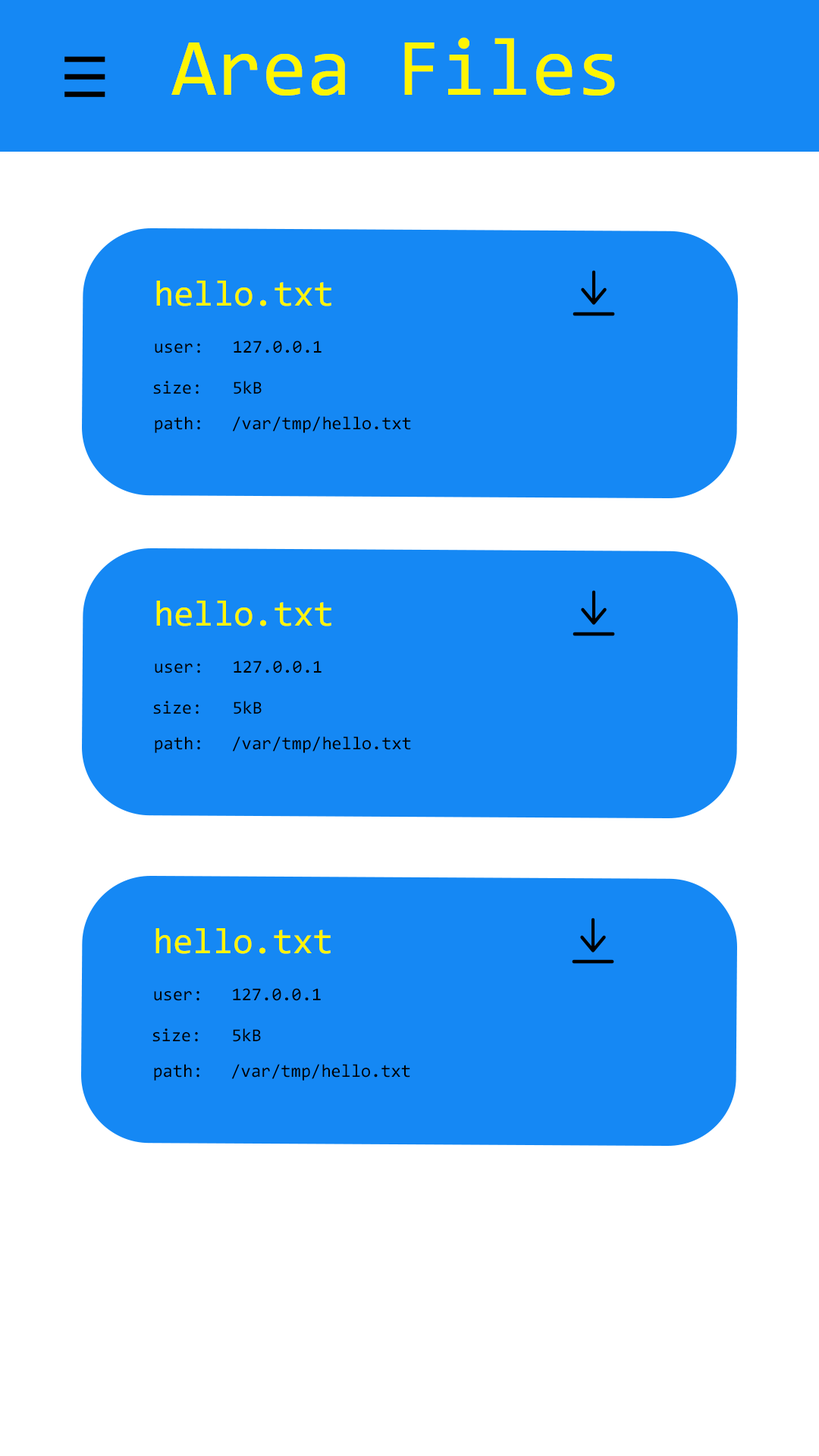
<style>
.page{position:relative;width:819px;height:1456px;background:#1588f4}
.page>*{position:absolute;margin:0}
.t1{font:81.9px "Consolas";color:#fef502}
.t2{font:36.4px "Consolas";color:#fef502}
.t3{font:18.2px "Consolas";color:#000000}
</style>
<div class="page">
<p class="t1" style="left:171px;top:37px;width:444px;height:59px">Area Files</p>
<p class="t2" style="left:156px;top:281px;width:175px;height:25px">hello.txt</p>
<p class="t3" style="left:234px;top:340px;width:88px;height:13px">127.0.0.1</p>
<p class="t3" style="left:155px;top:344px;width:45px;height:9px">user:</p>
<p class="t3" style="left:153px;top:381px;width:46px;height:13px">size:</p>
<p class="t3" style="left:234px;top:381px;width:28px;height:13px">5kB</p>
<p class="t3" style="left:155px;top:416px;width:45px;height:17px">path:</p>
<p class="t3" style="left:232px;top:416px;width:179px;height:17px">/var/tmp/hello.txt</p>
<p class="t2" style="left:156px;top:601px;width:175px;height:25px">hello.txt</p>
<p class="t3" style="left:155px;top:664px;width:45px;height:9px">user:</p>
<p class="t3" style="left:234px;top:660px;width:88px;height:13px">127.0.0.1</p>
<p class="t3" style="left:153px;top:701px;width:46px;height:13px">size:</p>
<p class="t3" style="left:234px;top:701px;width:28px;height:13px">5kB</p>
<p class="t3" style="left:155px;top:736px;width:45px;height:17px">path:</p>
<p class="t3" style="left:232px;top:736px;width:179px;height:17px">/var/tmp/hello.txt</p>
<p class="t2" style="left:155px;top:928px;width:176px;height:26px">hello.txt</p>
<p class="t3" style="left:233px;top:988px;width:88px;height:13px">127.0.0.1</p>
<p class="t3" style="left:154px;top:991px;width:45px;height:10px">user:</p>
<p class="t3" style="left:152px;top:1028px;width:46px;height:14px">size:</p>
<p class="t3" style="left:233px;top:1028px;width:28px;height:14px">5kB</p>
<p class="t3" style="left:154px;top:1064px;width:45px;height:17px">path:</p>
<p class="t3" style="left:231px;top:1064px;width:179px;height:17px">/var/tmp/hello.txt</p>
</div>
